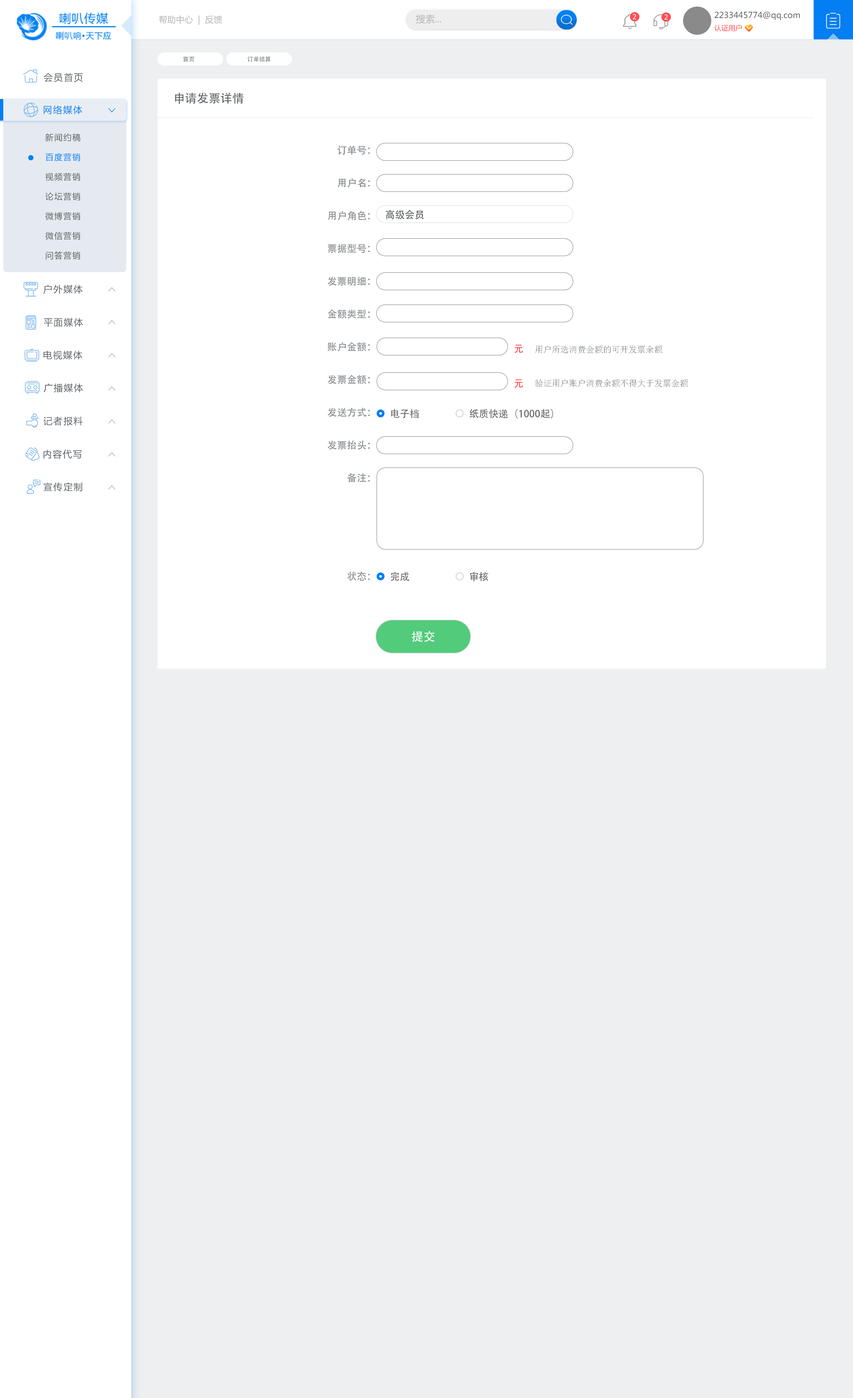
<style>
.page{position:relative;width:853px;height:1398px;background:#edeff0}
.page>*{position:absolute;margin:0}
.t1{font:8.6px "MicrosoftYaHei";color:#b4b4b4}
.t2{font:9.4px "MicrosoftYaHei";color:#b4b4b4}
.t3{font:6.9px "Tahoma";letter-spacing:0.1em;color:#ffffff;text-transform:uppercase}
.t4{font:8.2px/12.3px "MicrosoftYaHei";color:#5c6165}
.t5{font:7.1px/12.3px "MicrosoftYaHei";color:#fe4d55}
.t6{font:5.9px "AdobeHeitiStd-Regular";color:#878b8e}
.t7{font:9.2px "MicrosoftYaHei";letter-spacing:0.1em;color:#5c6165}
.t8{font:11.8px "AdobeHeitiStd-Regular";color:#5c6165}
.t9{font:9.2px "MicrosoftYaHei";letter-spacing:0.1em;color:#0582f5}
.t10{font:8.2px/19.7px "MicrosoftYaHei";letter-spacing:0.1em;color:#5c6165}
.t11{font:8.2px/19.7px "MicrosoftYaHei";letter-spacing:0.1em;color:#0381f5}
.t12{font:9.8px/32.8px "AdobeHeitiStd-Regular";color:#878b8e}
.t13{font:9.8px "AdobeHeitiStd-Regular";color:#5c6165}
.t14{font:9.8px "AdobeHeitiStd-Regular";color:#fe4d55}
.t15{font:8.5px "SimSun";color:#878b8e}
.t16{font:9.8px "AdobeHeitiStd-Regular";color:#696969}
.t17{font:11.8px "AdobeHeitiStd-Regular";color:#fefefe}
</style>
<div class="page">
<p class="t1" style="left:159px;top:15px;width:63px;height:10px">帮助中心  |  反馈</p>
<p class="t2" style="left:416px;top:14px;width:25px;height:10px">搜索...</p>
<p class="t3" style="left:633px;top:14px;width:3px;height:5px">2</p>
<p class="t3" style="left:664px;top:14px;width:4px;height:6px">2</p>
<p class="t4" style="left:714px;top:11px;width:86px;height:20px">2233445774@qq.com<br><span class="t5">认证用户</span></p>
<p class="t6" style="left:183px;top:56px;width:11px;height:6px">首页</p>
<p class="t6" style="left:247px;top:56px;width:24px;height:6px">订单结算</p>
<p class="t7" style="left:44px;top:73px;width:39px;height:9px">会员首页</p>
<p class="t8" style="left:175px;top:92px;width:68px;height:12px">申请发票详情</p>
<p class="t9" style="left:44px;top:105px;width:38px;height:9px">网络媒体</p>
<p class="t10" style="left:45px;top:133px;width:35px;height:127px">新闻约稿<br><span class="t11">百度营销<br></span>视频营销<br>论坛营销<br>微博营销<br>微信营销<br>问答营销</p>
<p class="t12" style="left:327px;top:146px;width:43px;height:435px;text-align:right">订单号：<br>用户名：<br>用户角色：<br>票据型号：<br>发票明细：<br>金额类型：<br>账户金额：<br>发票金额：<br>发送方式：<br>发票抬头：<br>备注：<br><br><br>状态：</p>
<p class="t13" style="left:386px;top:210px;width:38px;height:9px">高级会员</p>
<p class="t7" style="left:43px;top:285px;width:40px;height:9px">户外媒体</p>
<p class="t7" style="left:44px;top:318px;width:39px;height:9px">平面媒体</p>
<p class="t7" style="left:43px;top:351px;width:39px;height:9px">电视媒体</p>
<p class="t14" style="left:514px;top:345px;width:9px;height:8px">元</p>
<p class="t15" style="left:535px;top:346px;width:127px;height:8px">用户所选消费金额的可开发票余额</p>
<p class="t7" style="left:44px;top:383px;width:39px;height:10px">广播媒体</p>
<p class="t14" style="left:514px;top:379px;width:9px;height:9px">元</p>
<p class="t15" style="left:535px;top:379px;width:153px;height:8px">验证用户账户消费余额不得大于发票金额</p>
<p class="t16" style="left:391px;top:409px;width:27px;height:9px">电子档</p>
<p class="t16" style="left:469px;top:409px;width:84px;height:9px">纸质快递（1000起）</p>
<p class="t7" style="left:43px;top:417px;width:40px;height:9px">记者报料</p>
<p class="t7" style="left:43px;top:450px;width:39px;height:9px">内容代写</p>
<p class="t7" style="left:43px;top:482px;width:39px;height:10px">宣传定制</p>
<p class="t16" style="left:391px;top:572px;width:18px;height:9px">完成</p>
<p class="t16" style="left:470px;top:572px;width:18px;height:9px">审核</p>
<p class="t17" style="left:412px;top:631px;width:22px;height:11px">提交</p>
</div>
